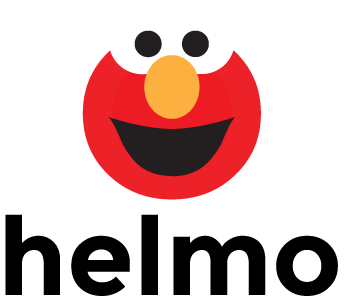
<style>
.page{position:relative;width:344px;height:296px;background:#ffffff}
.page>*{position:absolute;margin:0}
.t1{font:108px "Montserrat-Bold";color:#000000}
</style>
<div class="page">
<p class="t1" style="left:5px;top:214px;width:333px;height:82px">helmo</p>
</div>
